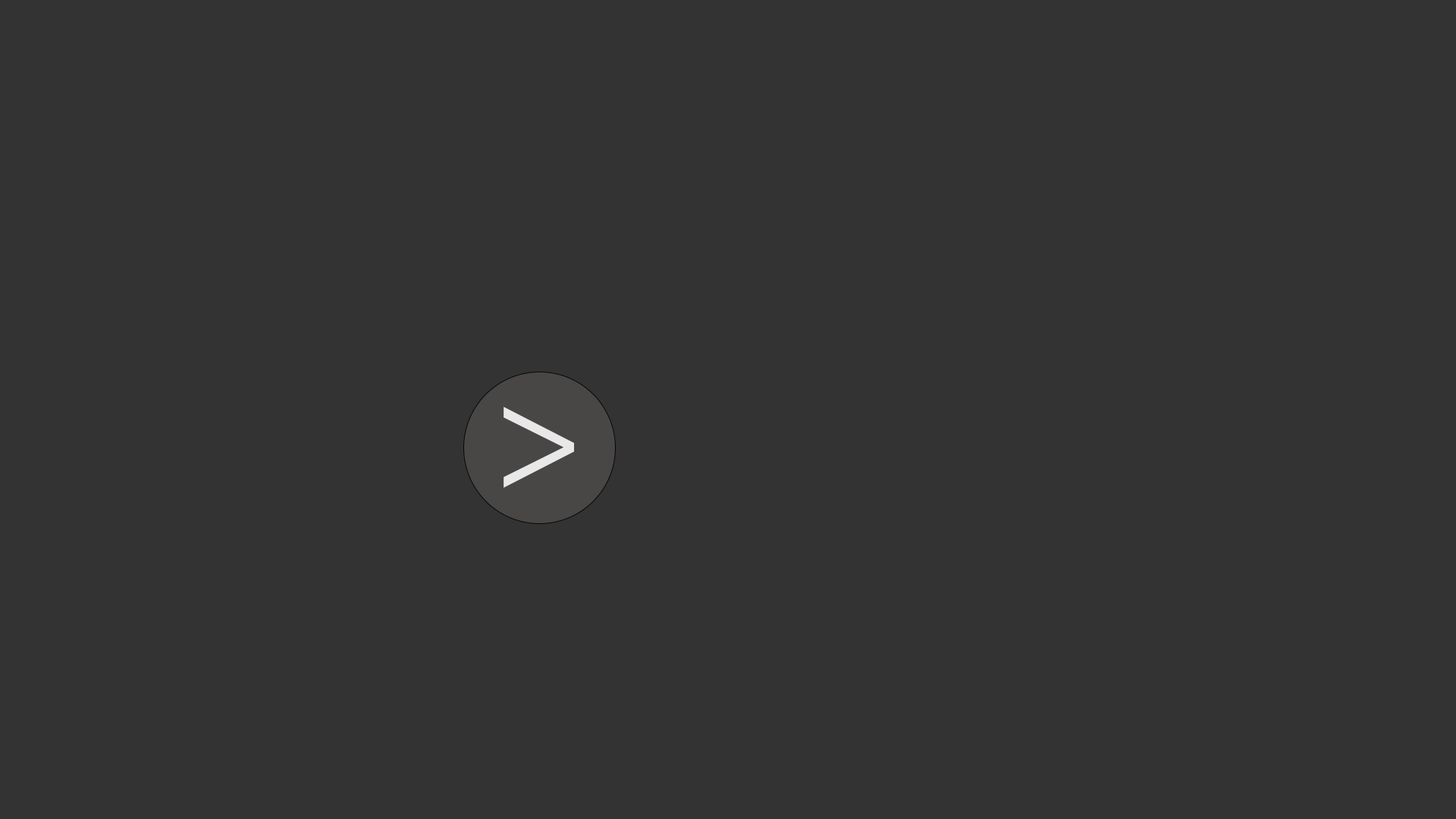
<style>
.page{position:relative;width:1456px;height:819px;background:#333333}
.page>*{position:absolute;margin:0}
.t1{font:151.7px "MyriadPro-Regular";color:#ffffff}
</style>
<div class="page">
<p class="t1" style="left:504px;top:406px;width:70px;height:82px;opacity:0.85">&gt;</p>
</div>
